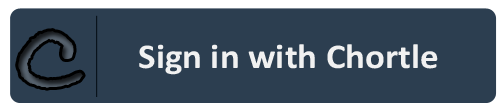
<style>
.page{position:relative;width:500px;height:110px;background:#2c3e50}
.page>*{position:absolute;margin:0}
.t1{font:103.2px "BradleyHandITCTTBold";scale:1.06 1}
.t2{font:34.9px "Calibri-Bold";color:#f1f1f1;scale:1.06 1}
</style>
<div class="page">
<p class="t1" style="left:18px;top:31px;width:65px;height:57px;rotate:14deg">C</p>
<p class="t2" style="left:139px;top:44px;width:299px;height:31px">Sign in with Chortle</p>
</div>
